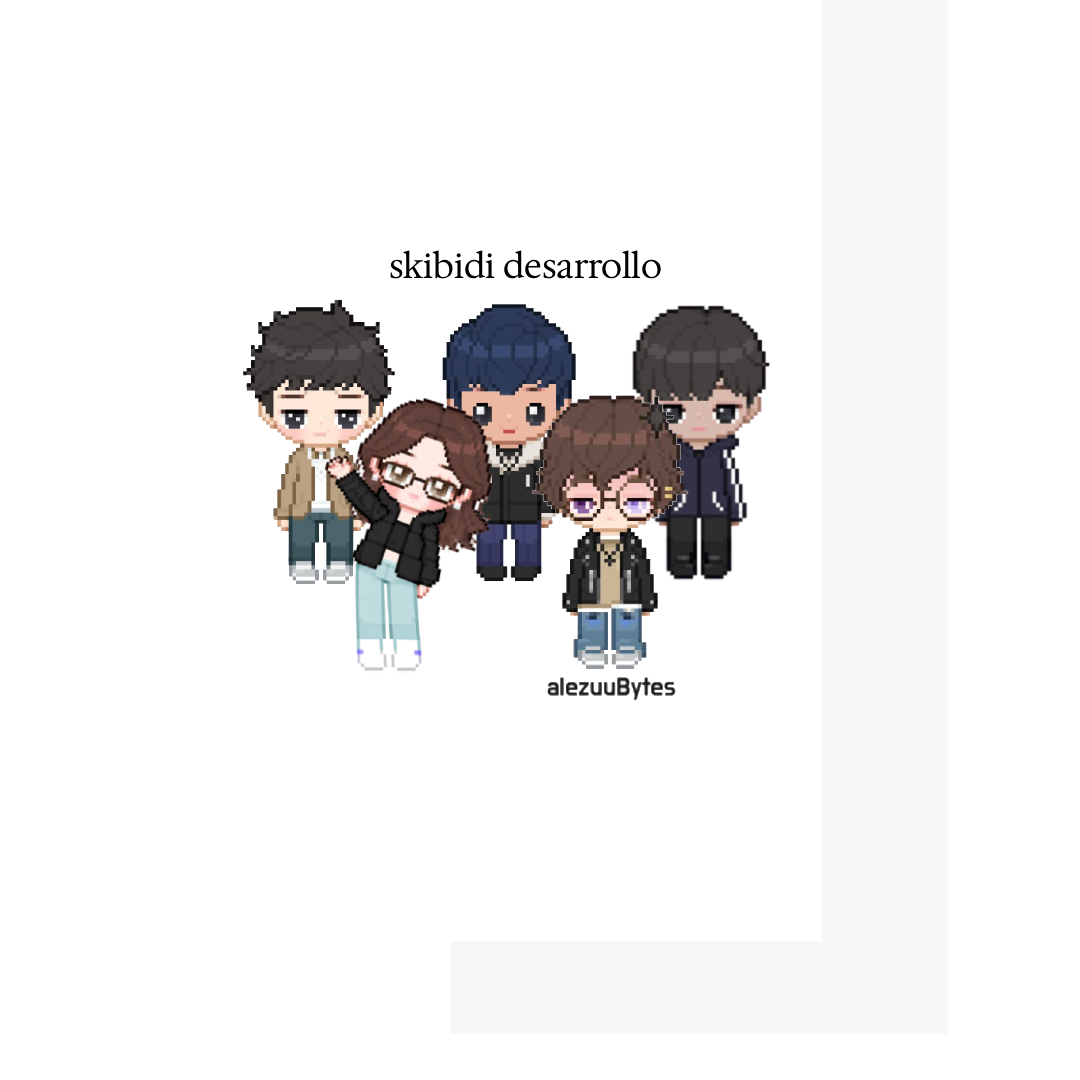
<style>
.page{position:relative;width:1080px;height:1080px;background:#ffffff}
.page>*{position:absolute;margin:0}
.t1{font:34.2px "HedvigLettersSerif-Regular";color:#000000}
</style>
<div class="page">
<p class="t1" style="left:390px;top:250px;width:271px;height:29px">skibidi desarrollo</p>
</div>
